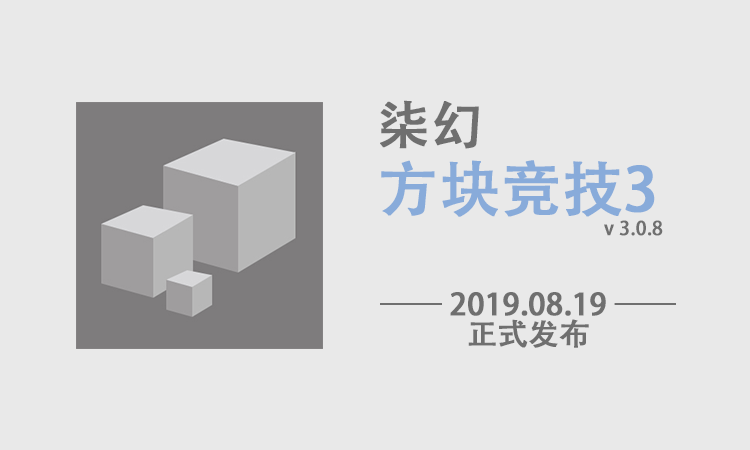
<style>
.page{position:relative;width:750px;height:450px;background:#e9e9e9}
.page>*{position:absolute;margin:0}
.t1{font:19px/60px "AdobeHeitiStd-Regular";color:#6f6f6f;font-weight:bold}
.t2{font:52px/60px "AdobeHeitiStd-Regular";color:#6f6f6f;font-weight:bold}
.t3{font:60px/60px "AdobeHeitiStd-Regular";color:#88abda;font-weight:bold}
.t4{font:30px/30px "AdobeHeitiStd-Regular";color:#6f6f6f;font-weight:bold}
</style>
<div class="page">
<p class="t1" style="left:380px;top:100px;width:283px;height:136px"><span class="t2">柒幻<br></span><span class="t3">方块竞技3<br></span>v 3.0.8</p>
<p class="t4" style="left:380px;top:292px;width:296px;height:56px;text-align:center">—— 2019.08.19 ——<br>正式发布</p>
</div>
